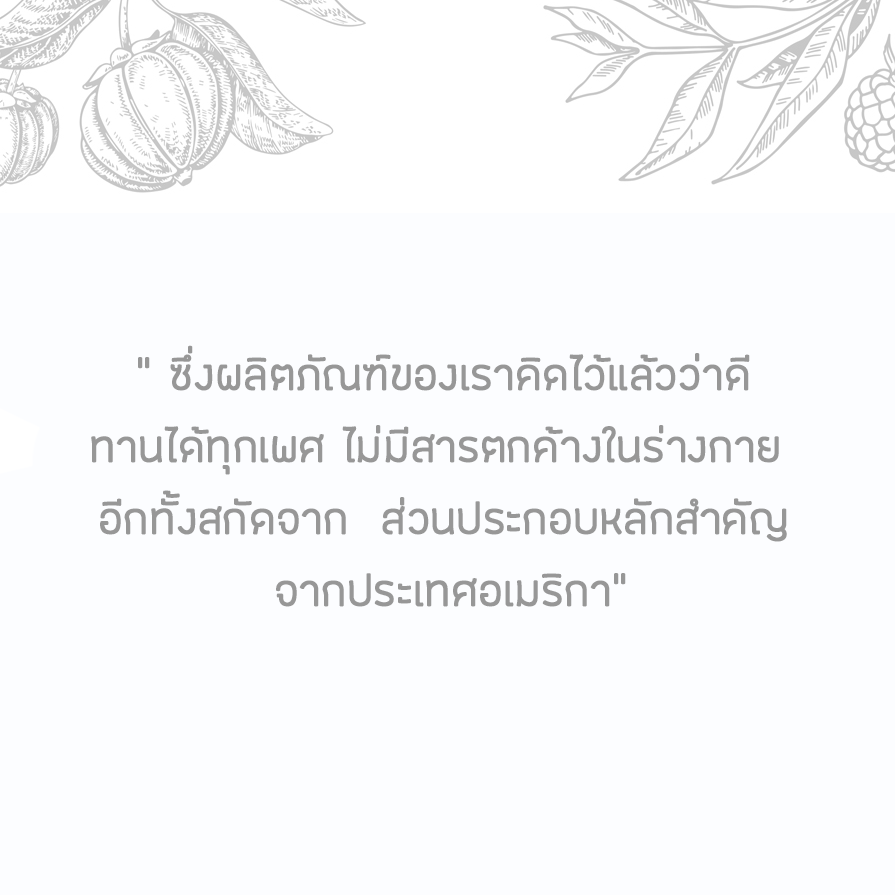
<style>
.page{position:relative;width:895px;height:895px;background:#fcfdff}
.page>*{position:absolute;margin:0}
.t1{font:60px "FCLamoonRegular";color:#979797;font-weight:bold}
</style>
<div class="page">
<p class="t1" style="left:91px;top:345px;width:696px;height:262px;text-align:center">“ ซึ่งผลิตภัณฑ์ของเราคิดไว้แล้วว่าดี <br>ทานได้ทุกเพศ ไม่มีสารตกค้างในร่างกาย  <br>อีกทั้งสกัดจาก  ส่วนประกอบหลักสำคัญ <br>จากประเทศอเมริกา”</p>
</div>
